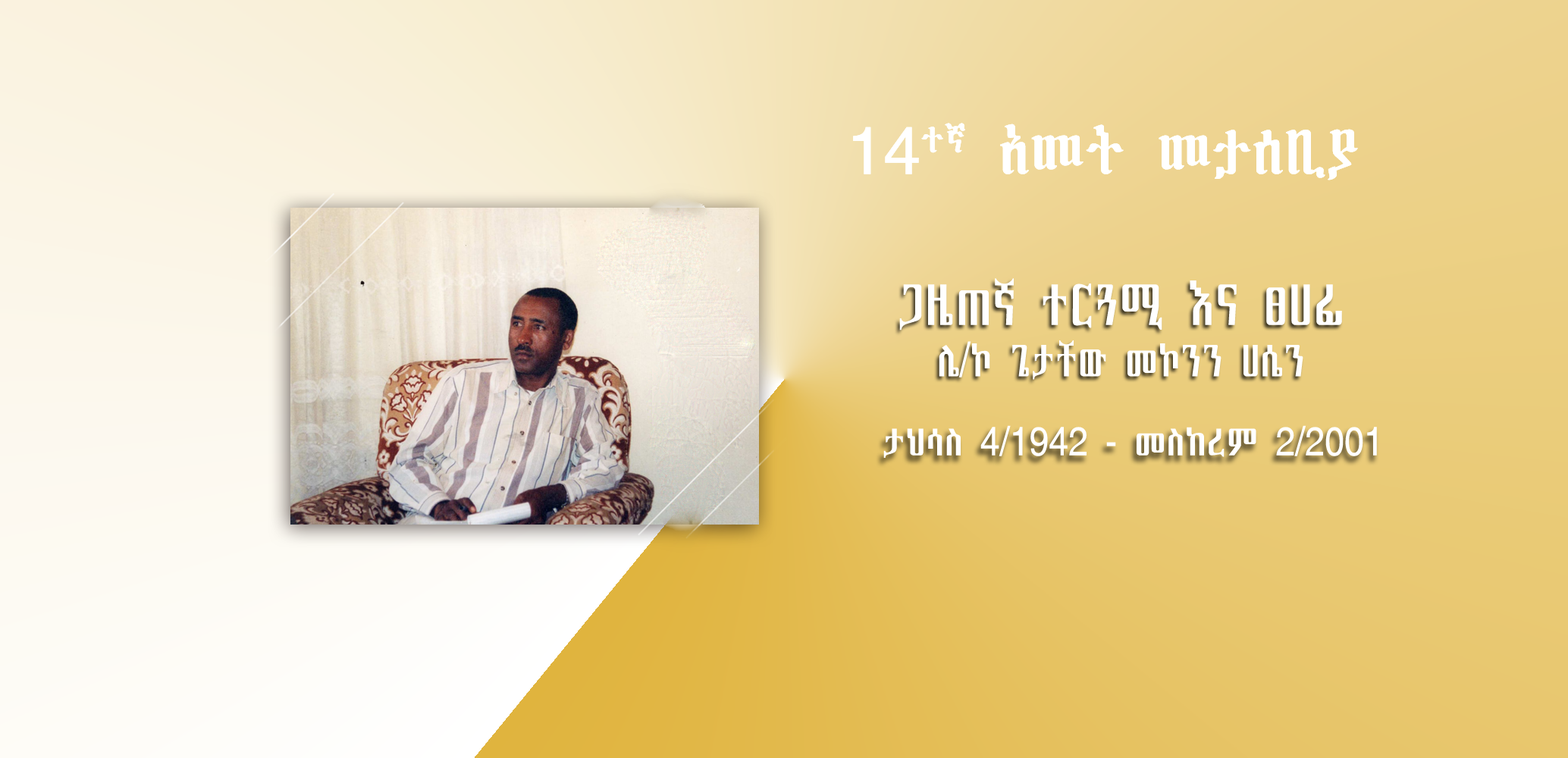
<style>
.page{position:relative;width:1568px;height:758px}
.page>*{position:absolute;margin:0}
.t1{font:65.1px "PowerGeezUnicode3";color:#ffffff}
.t2{font:45.9px/51.3px "PowerGeezUnicode2";color:#ffffff;scale:0.78 1}
.t3{font:59.4px/51.3px "PowerGeezUnicode2";color:#ffffff;scale:0.78 1}
.t4{font:39px "PowerGeezUnicode2";color:#ffffff;scale:0.88 1}
</style>
<div class="page">
<p class="t1" style="left:853px;top:123px;width:505px;height:57px">14ተኛ አመት መታሰቢያ</p>
<p class="t2" style="left:899px;top:278px;width:443px;height:102px;text-align:center"><span class="t3">ጋዜጠኛ ተርጓሚ እና ፀሀፊ<br></span>ሌ/ኮ ጌታቸው መኮንን ሀሴን</p>
<p class="t4" style="left:883px;top:425px;width:494px;height:33px">ታህሳስ 4/1942 - መስከረም 2/2001</p>
</div>
